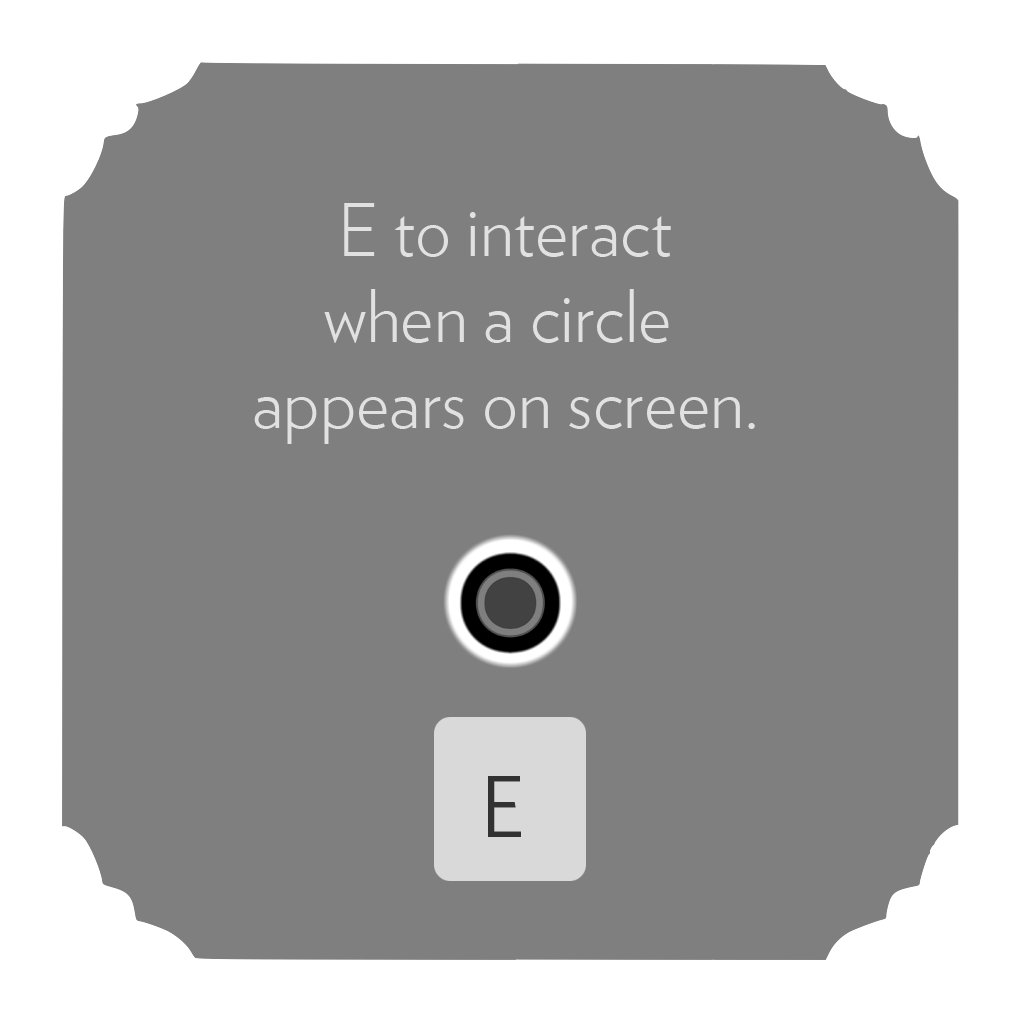
<style>
.page{position:relative;width:1024px;height:1024px;background:#7f7f7f}
.page>*{position:absolute;margin:0}
.t1{font:72px "Verlag-Light";color:#e1e1e1}
.t2{font:89px "WhitneyHTF-Book";color:#323232}
</style>
<div class="page">
<p class="t1" style="left:254px;top:203px;width:501px;height:241px;text-align:center">E to interact<br>when a circle <br>appears on screen.</p>
<p class="t2" style="left:488px;top:776px;width:33px;height:61px">E</p>
</div>
